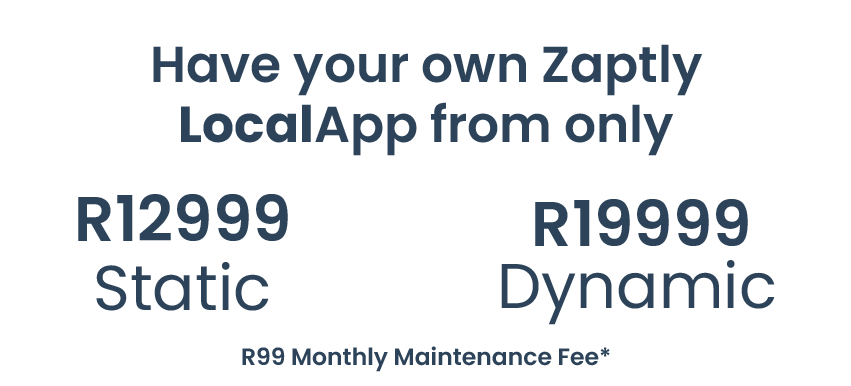
<style>
.page{position:relative;width:851px;height:386px;background:#ffffff}
.page>*{position:absolute;margin:0}
.t1{font:50.4px "Poppins-SemiBold";color:#2c435a}
.t2{font:50.4px "Poppins-Bold";color:#2c435a}
.t3{font:63.1px "Poppins-SemiBold";color:#2c435a}
.t4{font:63.2px "Poppins-Regular";color:#2c435a}
.t5{font:63.1px "Poppins-Regular";color:#2c435a}
.t6{font:23.6px "Poppins-SemiBold";color:#2c435a}
</style>
<div class="page">
<p class="t1" style="left:153px;top:44px;width:549px;height:112px;text-align:center">Have your own Zaptly<br><span class="t2">Local</span>App from only</p>
<p class="t3" style="left:78px;top:194px;width:210px;height:47px">R12999</p>
<p class="t3" style="left:535px;top:199px;width:213px;height:47px">R19999</p>
<p class="t4" style="left:96px;top:262px;width:173px;height:49px">Static</p>
<p class="t5" style="left:501px;top:260px;width:274px;height:65px">Dynamic</p>
<p class="t6" style="left:242px;top:346px;width:368px;height:26px">R99 Monthly Maintenance Fee*</p>
</div>
